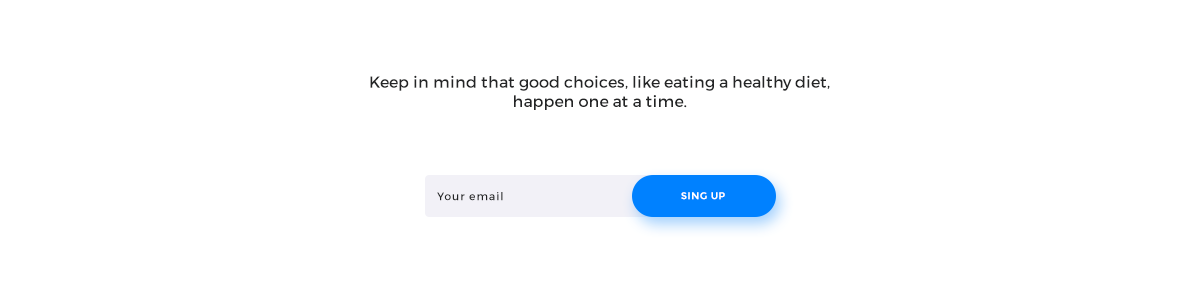
<style>
.page{position:relative;width:1200px;height:300px;background:#ffffff}
.page>*{position:absolute;margin:0}
.t1{font:16px "Montserrat-Regular";color:#242526}
.t2{font:11px "Montserrat-Regular";letter-spacing:0.08em;color:#242526}
.t3{font:10px "Montserrat-Bold";letter-spacing:0.04em;color:#ffffff;text-transform:uppercase}
</style>
<div class="page">
<p class="t1" style="left:370px;top:75px;width:460px;height:35px;text-align:center">Keep in mind that good choices, like eating a healthy diet, happen one at a time.</p>
<p class="t2" style="left:437px;top:192px;width:66px;height:9px">Your email</p>
<p class="t3" style="left:681px;top:192px;width:44px;height:8px">sing up</p>
</div>
